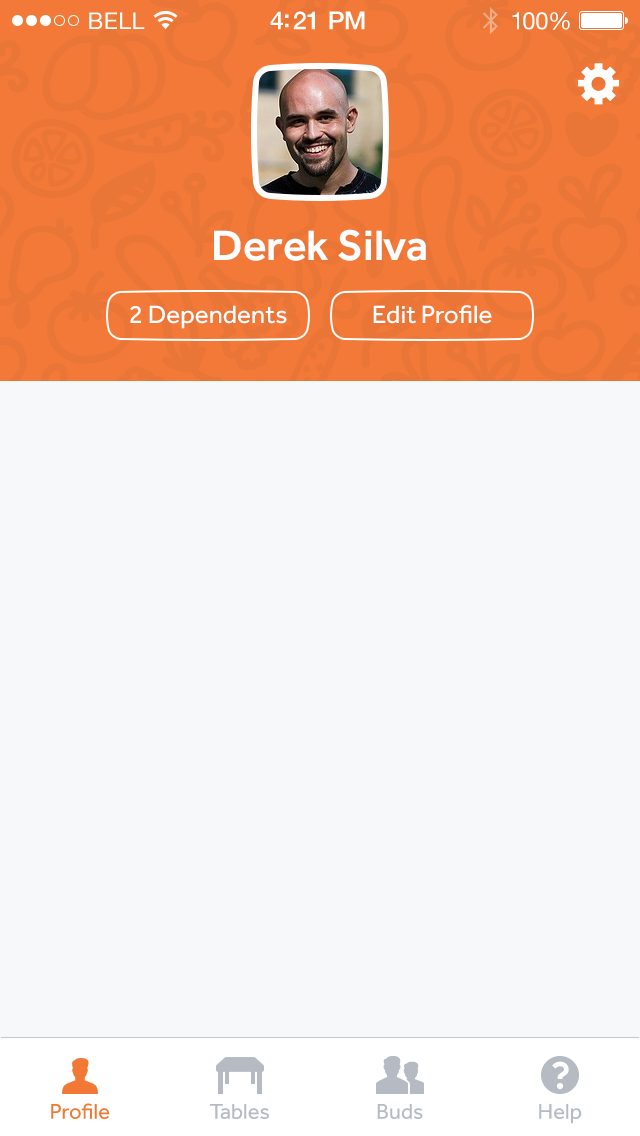
<style>
.page{position:relative;width:640px;height:1136px;background:#f6f8fa}
.page>*{position:absolute;margin:0}
.t1{font:23px "HelveticaNeue";letter-spacing:0.02em;color:#ffffff}
.t2{font:25px "HelveticaNeue-Medium";letter-spacing:-0.02em;color:#ffffff}
.t3{font:24px "HelveticaNeue";letter-spacing:-0.02em;color:#ffffff}
.t4{font:44px "Effra-Medium";color:#ffffff}
.t5{font:26px "Effra-Regular";color:#ffffff}
.t6{font:22px "Effra-Regular";color:#f27935}
.t7{font:22px "Effra-Regular";color:#b5bac3}
</style>
<div class="page">
<p class="t1" style="left:89px;top:12px;width:56px;height:17px">BELL</p>
<p class="t2" style="left:270px;top:11px;width:95px;height:19px">4:21 PM</p>
<p class="t3" style="left:512px;top:12px;width:58px;height:18px">100%</p>
<p class="t4" style="left:214px;top:229px;width:212px;height:32px">Derek Silva</p>
<p class="t5" style="left:130px;top:305px;width:157px;height:24px">2 Dependents</p>
<p class="t5" style="left:373px;top:305px;width:119px;height:19px">Edit Profile</p>
<p class="t6" style="left:51px;top:1103px;width:59px;height:16px">Profile</p>
<p class="t7" style="left:210px;top:1104px;width:59px;height:15px">Tables</p>
<p class="t7" style="left:377px;top:1104px;width:46px;height:15px">Buds</p>
<p class="t7" style="left:539px;top:1104px;width:43px;height:20px">Help</p>
</div>
